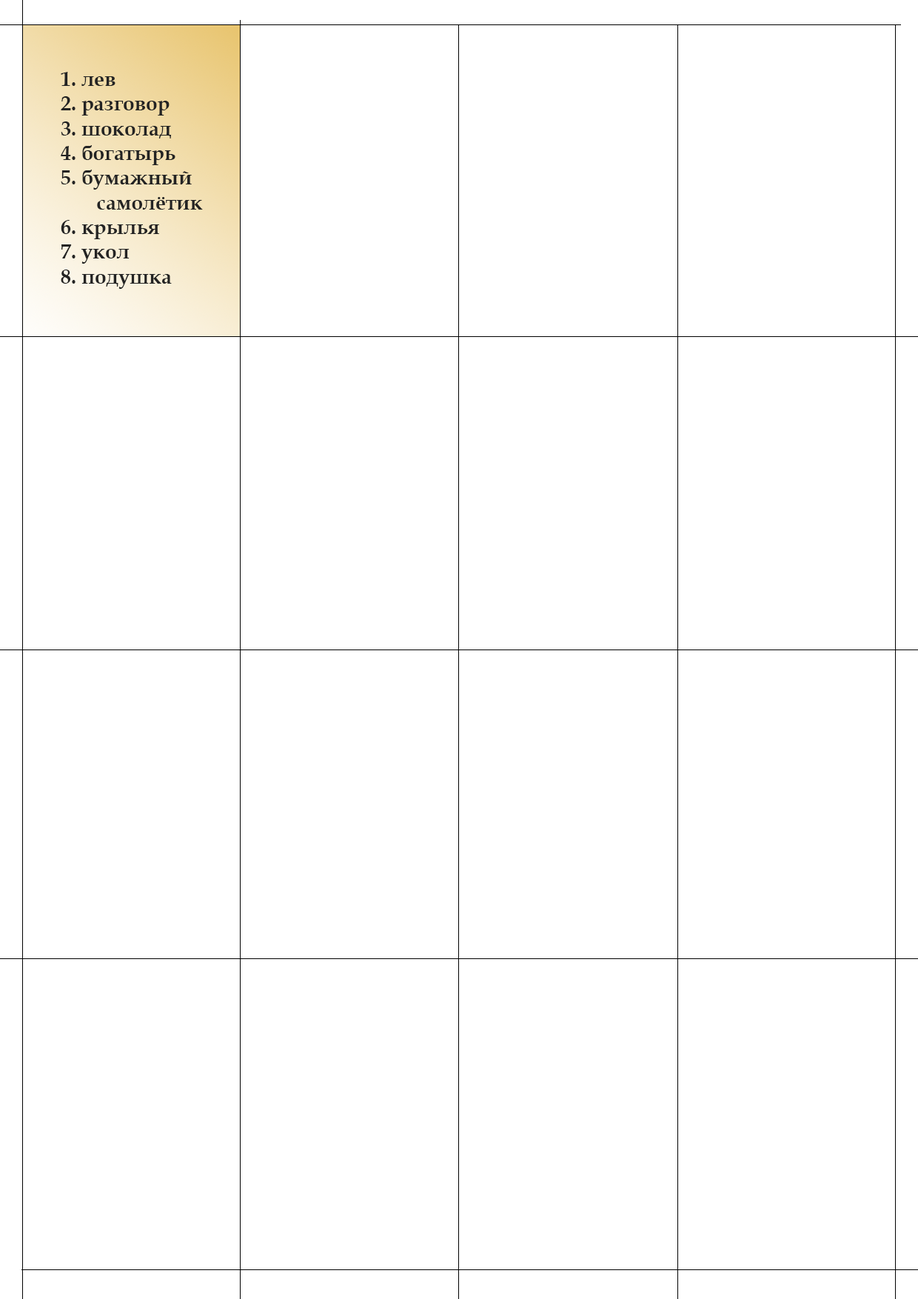
<style>
.page{position:relative;width:918px;height:1299px;background:#ffffff}
.page>*{position:absolute;margin:0}
.t1{font:20.6px "BookAntiqua-Bold";color:#232323}
.t2{font:20.6px/24.7px "BookAntiqua-Bold";color:#232323}
</style>
<div class="page">
<p class="t1" style="left:61px;top:72px;width:142px;height:217px">1. лев<br>2. разговор<br>3. шоколад<br>4. богатырь<br>5. бумажный<br><span class="t2">       самолётик<br>6. крылья<br></span>7. укол<br>8. подушка</p>
</div>
